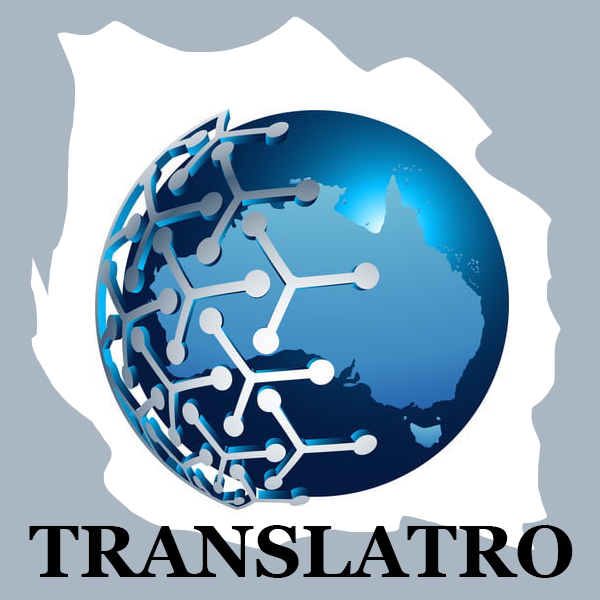
<style>
.page{position:relative;width:600px;height:600px;background:#aab6c2}
.page>*{position:absolute;margin:0}
.t1{font:72.6px "Georgia-Bold";letter-spacing:0.005em;color:#020101;text-transform:uppercase}
</style>
<div class="page">
<p class="t1" style="left:29px;top:525px;width:544px;height:53px">Translatro</p>
</div>
